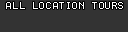
<style>
.page{position:relative;width:128px;height:32px;background:#333333}
.page>*{position:absolute;margin:0}
.t1{font:8px "Terminal";letter-spacing:0.075em;color:#ffffff}
</style>
<div class="page">
<p class="t1" style="left:6px;top:2px;width:117px;height:7px">ALL LOCATION TOURS</p>
</div>
